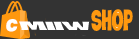
<style>
.page{position:relative;width:139px;height:39px;background:#333333}
.page>*{position:absolute;margin:0}
.t1{font:28.3px "iCielCrocante";color:#fe980f;scale:0.6 1}
.t2{font:16.7px "iCielCrocante";color:#ffffff;scale:1.04 1}
.t3{font:12.9px "iCielCrocante";color:#ffffff;scale:2.32 1}
</style>
<div class="page">
<p class="t1" style="left:91px;top:9px;width:42px;height:22px">Shop</p>
<p class="t2" style="left:6px;top:19px;width:12px;height:13px">C</p>
<p class="t3" style="left:19px;top:21px;width:71px;height:9px">MIIW</p>
</div>
